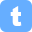
<style>
.page{position:relative;width:32px;height:32px;background:#66aeff}
.page>*{position:absolute;margin:0}
.t1{font:27px "Arial-Black";color:#ffffff}
</style>
<div class="page">
<p class="t1" style="left:10px;top:6px;width:12px;height:20px">t</p>
</div>
